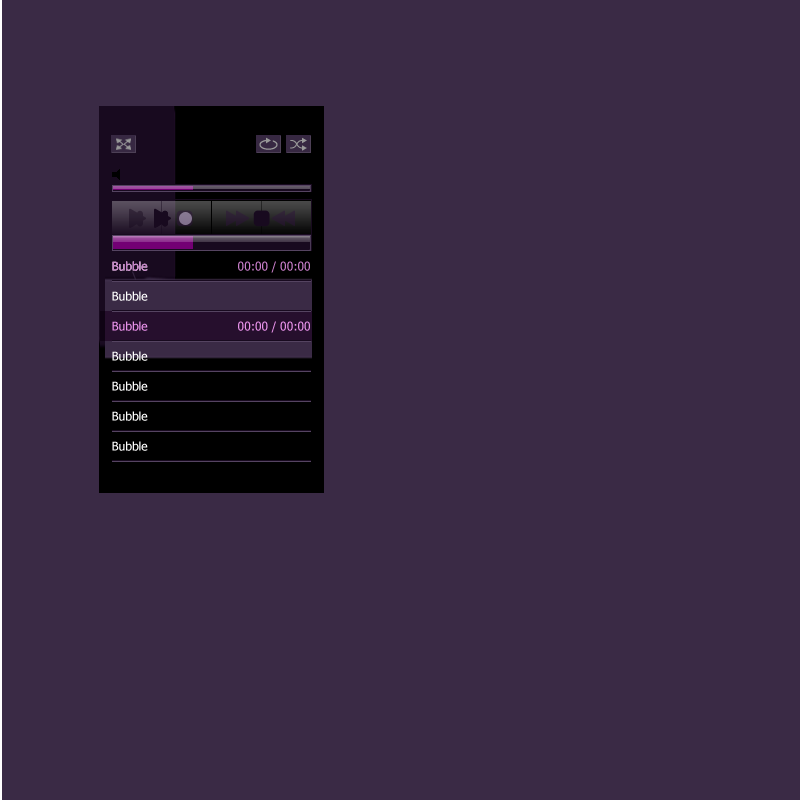
<style>
.page{position:relative;width:800px;height:800px;background:#3a2a45}
.page>*{position:absolute;margin:0}
.t1{font:12px "Tahoma";color:#c87ec9}
.t2{font:12px "Tahoma";color:#ffffff}
.t3{font:12px "Tahoma";color:#e892e9}
</style>
<div class="page">
<p class="t1" style="left:112px;top:261px;width:36px;height:10px">Bubble</p>
<p class="t2" style="left:112px;top:291px;width:36px;height:10px">Bubble</p>
<p class="t3" style="left:112px;top:321px;width:198px;height:12px">Bubble                        00:00 / 00:00</p>
<p class="t2" style="left:112px;top:351px;width:36px;height:10px">Bubble</p>
<p class="t2" style="left:112px;top:381px;width:36px;height:10px">Bubble</p>
<p class="t2" style="left:112px;top:411px;width:36px;height:10px">Bubble</p>
<p class="t2" style="left:112px;top:441px;width:36px;height:10px">Bubble</p>
</div>
